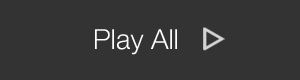
<style>
.page{position:relative;width:300px;height:80px;background:#333333}
.page>*{position:absolute;margin:0}
.t1{font:27.9px "HelveticaNeueLTCom-Lt";color:#ffffff}
</style>
<div class="page">
<p class="t1" style="left:95px;top:29px;width:82px;height:26px">Play All</p>
</div>
